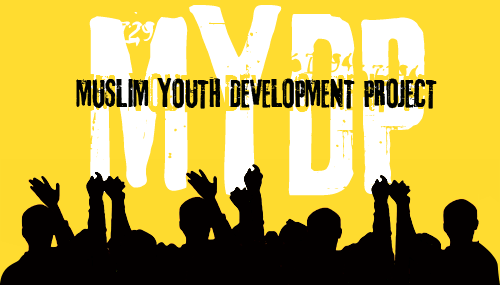
<style>
.page{position:relative;width:500px;height:285px;background:#ffdc30}
.page>*{position:absolute;margin:0}
.t1{font:240px "3rdMan";color:#ffffff}
.t2{font:36px "3rdMan";color:#000200}
</style>
<div class="page">
<p class="t1" style="left:89px;top:5px;width:336px;height:191px">MYDP</p>
<p class="t2" style="left:76px;top:77px;width:361px;height:32px">MUSLIM YOUTH DEVELOPMENT PROJECT</p>
</div>
